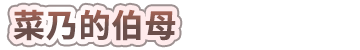
<style>
.page{position:relative;width:360px;height:50px;background:#ffffff}
.page>*{position:absolute;margin:0}
.t1{font:32px "SourceHanSansSC-Bold";color:#73534d;font-weight:bold}
</style>
<div class="page">
<p class="t1" style="left:13px;top:9px;width:163px;height:32px">菜乃的伯母</p>
</div>
